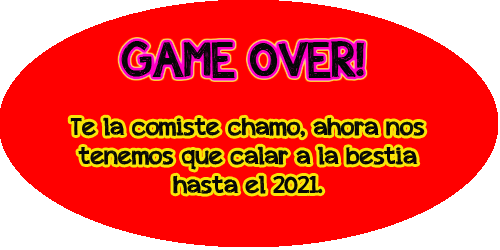
<style>
.page{position:relative;width:500px;height:250px;background:#ff0000}
.page>*{position:absolute;margin:0}
.t1{font:48px "appleberry";color:#060606}
.t2{font:24px "appleberry";color:#060606}
</style>
<div class="page">
<p class="t1" style="left:121px;top:41px;width:243px;height:37px">GAME OVER!</p>
<p class="t2" style="left:70px;top:117px;width:355px;height:77px;text-align:center">Te la comiste chamo, ahora nos tenemos que calar a la bestia hasta el 2021.</p>
</div>
